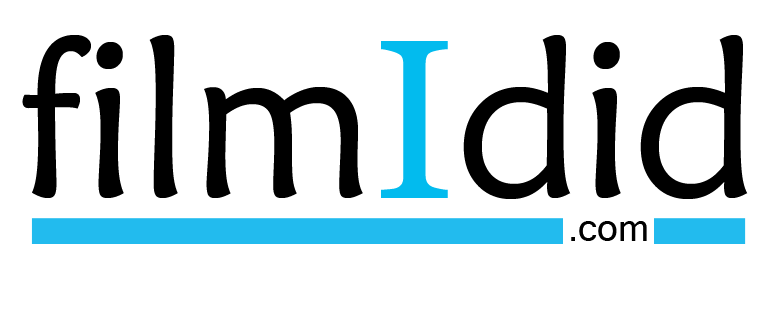
<style>
.page{position:relative;width:767px;height:312px;background:#ffffff}
.page>*{position:absolute;margin:0}
.t1{font:226.5px "MaiandraGD-Regular";color:#000000;scale:0.94 1}
.t2{font:226.5px "Vani";color:#02bbee;scale:0.94 1}
.t3{font:36.5px "Mangal";color:#000000}
</style>
<div class="page">
<p class="t1" style="left:22px;top:35px;width:726px;height:164px">film<span class="t2">I</span>did</p>
<p class="t3" style="left:571px;top:221px;width:76px;height:20px">.com</p>
</div>
